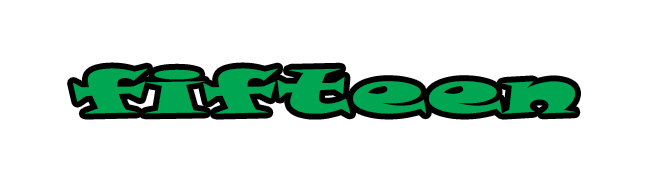
<style>
.page{position:relative;width:650px;height:191px;background:#ffffff}
.page>*{position:absolute;margin:0}
.t1{font:60px "SnapITC-Regular";color:#00a651;scale:2 1}
</style>
<div class="page">
<p class="t1" style="left:73px;top:68px;width:502px;height:46px">fifteen</p>
</div>
